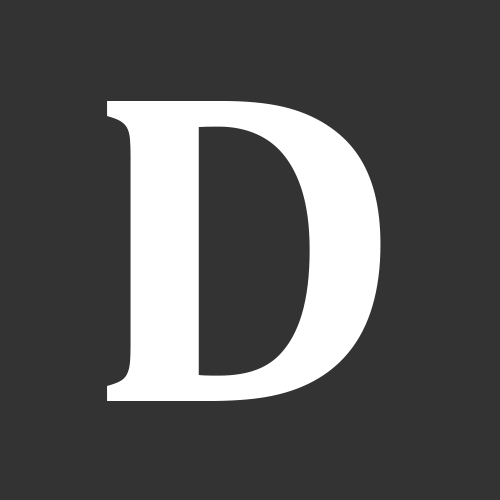
<style>
.page{position:relative;width:500px;height:500px;background:#333333}
.page>*{position:absolute;margin:0}
.t1{font:450px "Cambria-Bold";color:#ffffff}
</style>
<div class="page">
<p class="t1" style="left:107px;top:101px;width:274px;height:300px">D</p>
</div>
